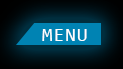
<style>
.page{position:relative;width:123px;height:69px}
.page>*{position:absolute;margin:0}
.t1{font:19.4px "Consolas";letter-spacing:0.05em;color:#ffffff}
</style>
<div class="page">
<p class="t1" style="left:42px;top:29px;width:45px;height:12px">MENU</p>
</div>
